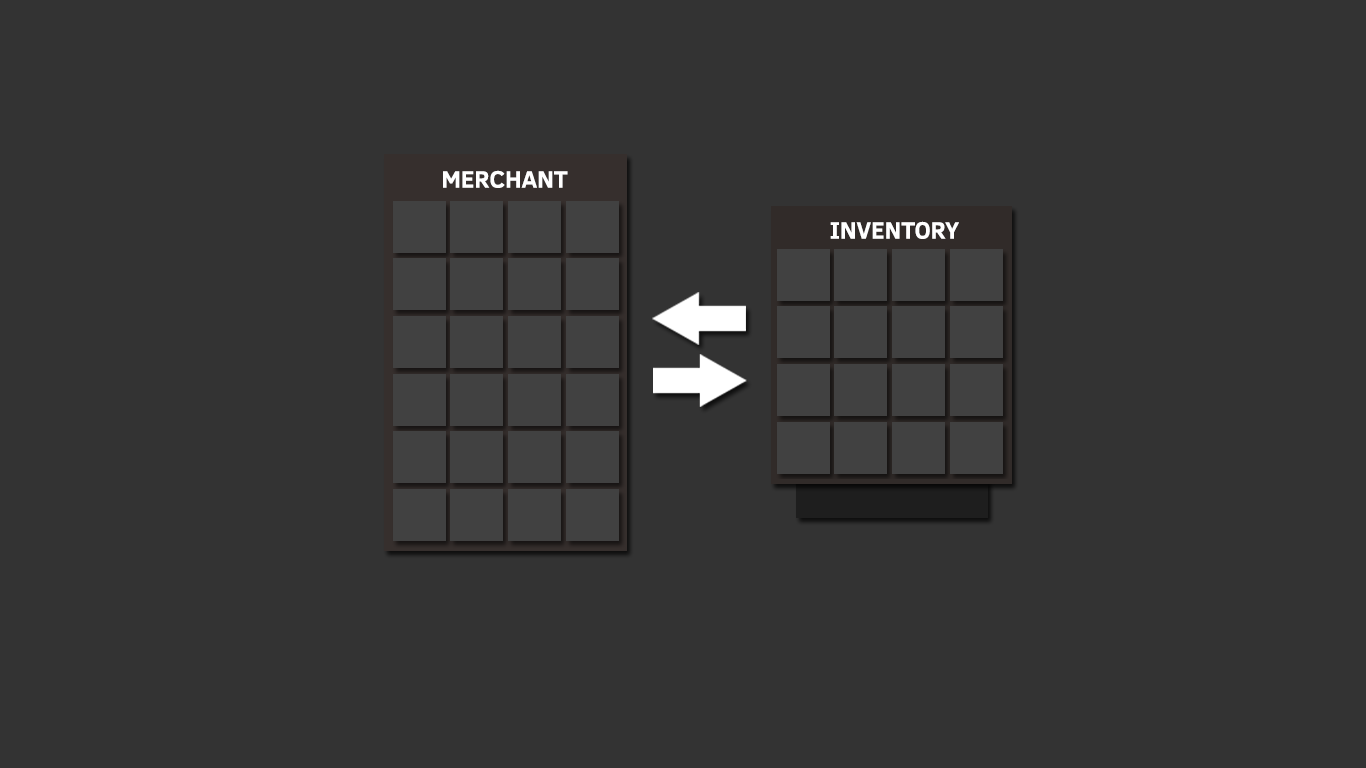
<style>
.page{position:relative;width:1366px;height:768px;background:#333333}
.page>*{position:absolute;margin:0}
.t1{font:24px "ClearSans-Bold";color:#ffffff}
</style>
<div class="page">
<p class="t1" style="left:443px;top:170px;width:125px;height:18px">MERCHANT</p>
<p class="t1" style="left:830px;top:221px;width:129px;height:18px">INVENTORY</p>
</div>
